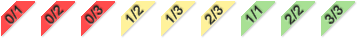
<style>
.page{position:relative;width:360px;height:40px;background:#ffffff}
.page>*{position:absolute;margin:0}
.t1{font:13.3px "ArialMT";color:#2c312c;font-weight:bold}
</style>
<div class="page">
<p class="t1" style="left:5px;top:5px;width:18px;height:19px;rotate:-45deg">0/1</p>
<p class="t1" style="left:45px;top:5px;width:19px;height:19px;rotate:-45deg">0/2</p>
<p class="t1" style="left:85px;top:5px;width:18px;height:19px;rotate:-45deg">0/3</p>
<p class="t1" style="left:126px;top:5px;width:18px;height:18px;rotate:-45deg">1/2</p>
<p class="t1" style="left:166px;top:5px;width:17px;height:18px;rotate:-45deg">1/3</p>
<p class="t1" style="left:205px;top:5px;width:18px;height:21px;rotate:-45deg">2/3</p>
<p class="t1" style="left:246px;top:5px;width:17px;height:18px;rotate:-45deg">1/1</p>
<p class="t1" style="left:285px;top:5px;width:19px;height:21px;rotate:-45deg">2/2</p>
<p class="t1" style="left:325px;top:5px;width:18px;height:20px;rotate:-45deg">3/3</p>
</div>
